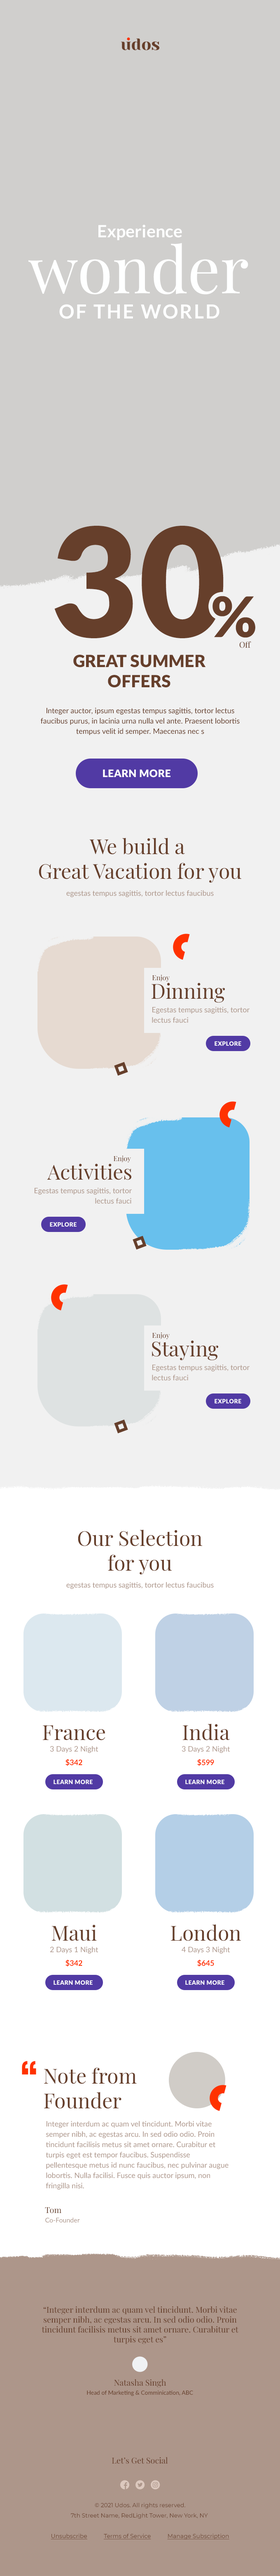
<style>
.page{position:relative;width:280px;height:2576px;background:#f1f1f1}
.page>*{position:absolute;margin:0}
.t1{font:17px "Lato-Bold";color:#feffff}
.t2{font:64.2px "PlayfairDisplay-Regular";color:#feffff}
.t3{font:19.4px "Lato-Bold";letter-spacing:0.08em;color:#feffff;text-transform:uppercase}
.t4{font:151px "Lato-Black";color:#663f2b}
.t5{font:55.6px "Lato-Black";color:#663f2b}
.t6{font:8.2px "PlayfairDisplay-Regular";color:#663f2b}
.t7{font:16.9px "Lato-Black";color:#663f2b;text-transform:uppercase}
.t8{font:7.4px/10.3px "Lato-Regular";color:#663f2b}
.t9{font:10.3px "Lato-Black";letter-spacing:0.02em;color:#ffffff;text-transform:uppercase}
.t10{font:20.6px "PlayfairDisplay-Regular";color:#663f2b}
.t11{font:7.4px "Lato-Regular";color:#ad968a}
.t12{font:7px "PlayfairDisplay-Regular";color:#663f2b}
.t13{font:7.4px/10.3px "Lato-Regular";color:#ad968a}
.t14{font:5.8px "Lato-Black";letter-spacing:0.04em;color:#ffffff;text-transform:uppercase}
.t15{font:7.4px "Lato-Bold";color:#ff3200}
.t16{font:6.6px "Lato-Regular";color:#ad968a}
.t17{font:5.8px "Lato-Regular";color:#663f2b}
.t18{font:5.8px/10.3px "Montserrat-Regular";color:#663f2b}
.t19{font:5.8px/10.3px "Montserrat-Regular";color:#663f2b;text-decoration:underline}
</style>
<div class="page">
<p class="t1" style="left:98px;top:225px;width:84px;height:15px">Experience</p>
<p class="t2" style="left:28px;top:243px;width:220px;height:52px">wonder</p>
<p class="t3" style="left:59px;top:304px;width:161px;height:15px">of the world</p>
<p class="t4" style="left:54px;top:526px;width:170px;height:112px">30</p>
<p class="t5" style="left:213px;top:596px;width:42px;height:42px">%</p>
<p class="t6" style="left:239px;top:641px;width:12px;height:7px">Off</p>
<p class="t7" style="left:73px;top:655px;width:133px;height:33px;text-align:center">Great Summer<br>Offers</p>
<p class="t8" style="left:41px;top:707px;width:199px;height:28px;text-align:center">Integer auctor, ipsum egestas tempus sagittis, tortor lectus faucibus purus, in lacinia urna nulla vel ante. Praesent lobortis tempus velit id semper. Maecenas nec s</p>
<p class="t9" style="left:103px;top:769px;width:68px;height:8px">LEARN MORE</p>
<p class="t10" style="left:39px;top:838px;width:202px;height:45px;text-align:center">We build a <br>Great Vacation for you</p>
<p class="t11" style="left:66px;top:890px;width:148px;height:7px">egestas tempus sagittis, tortor lectus faucibus</p>
<p class="t12" style="left:152px;top:975px;width:18px;height:6px">Enjoy</p>
<p class="t10" style="left:152px;top:983px;width:73px;height:20px">Dinning</p>
<p class="t13" style="left:152px;top:1007px;width:98px;height:16px">Egestas tempus sagittis, tortor lectus fauci</p>
<p class="t14" style="left:215px;top:1041px;width:26px;height:5px">EXPLORE</p>
<p class="t12" style="left:114px;top:1156px;width:17px;height:6px">Enjoy</p>
<p class="t10" style="left:47px;top:1164px;width:84px;height:16px">Activities</p>
<p class="t13" style="left:35px;top:1187px;width:97px;height:17px;text-align:right">Egestas tempus sagittis, tortor lectus fauci</p>
<p class="t14" style="left:50px;top:1222px;width:27px;height:5px">EXPLORE</p>
<p class="t12" style="left:152px;top:1332px;width:18px;height:7px">Enjoy</p>
<p class="t10" style="left:152px;top:1340px;width:66px;height:21px">Staying</p>
<p class="t13" style="left:152px;top:1364px;width:98px;height:17px">Egestas tempus sagittis, tortor lectus fauci</p>
<p class="t14" style="left:215px;top:1399px;width:26px;height:4px">EXPLORE</p>
<p class="t10" style="left:78px;top:1529px;width:124px;height:46px;text-align:center">Our Selection<br>for you</p>
<p class="t11" style="left:66px;top:1582px;width:148px;height:7px">egestas tempus sagittis, tortor lectus faucibus</p>
<p class="t10" style="left:43px;top:1725px;width:62px;height:15px">France</p>
<p class="t10" style="left:183px;top:1724px;width:47px;height:16px">India</p>
<p class="t11" style="left:50px;top:1746px;width:48px;height:7px">3 Days 2 Night</p>
<p class="t11" style="left:182px;top:1746px;width:48px;height:7px">3 Days 2 Night</p>
<p class="t15" style="left:66px;top:1759px;width:16px;height:7px">$342</p>
<p class="t15" style="left:197px;top:1759px;width:17px;height:7px">$599</p>
<p class="t14" style="left:54px;top:1780px;width:39px;height:4px">learn more</p>
<p class="t14" style="left:185px;top:1780px;width:40px;height:4px">learn more</p>
<p class="t10" style="left:52px;top:1925px;width:45px;height:16px">Maui</p>
<p class="t10" style="left:171px;top:1924px;width:70px;height:17px">London</p>
<p class="t11" style="left:50px;top:1946px;width:48px;height:8px">2 Days 1 Night</p>
<p class="t11" style="left:182px;top:1946px;width:48px;height:8px">4 Days 3 Night</p>
<p class="t15" style="left:66px;top:1960px;width:16px;height:7px">$342</p>
<p class="t15" style="left:197px;top:1960px;width:17px;height:7px">$645</p>
<p class="t14" style="left:54px;top:1980px;width:39px;height:5px">learn more</p>
<p class="t14" style="left:185px;top:1980px;width:40px;height:5px">learn more</p>
<p class="t10" style="left:44px;top:2068px;width:93px;height:41px">Note from<br>Founder</p>
<p class="t13" style="left:46px;top:2121px;width:183px;height:69px">Integer interdum ac quam vel tincidunt. Morbi vitae semper nibh, ac egestas arcu. In sed odio odio. Proin tincidunt facilisis metus sit amet ornare. Curabitur et turpis eget est tempor faucibus. Suspendisse pellentesque metus id nunc faucibus, nec pulvinar augue lobortis. Nulla facilisi. Fusce quis auctor ipsum, non fringilla nisi.</p>
<p class="t6" style="left:45px;top:2207px;width:16px;height:6px">Tom</p>
<p class="t16" style="left:45px;top:2218px;width:35px;height:4px">Co-Founder</p>
<p class="t6" style="left:42px;top:2306px;width:197px;height:38px;text-align:center">“Integer interdum ac quam vel tincidunt. Morbi vitae semper nibh, ac egestas arcu. In sed odio odio. Proin tincidunt facilisis metus sit amet ornare. Curabitur et turpis eget es”</p>
<p class="t6" style="left:114px;top:2379px;width:52px;height:8px">Natasha Singh</p>
<p class="t17" style="left:87px;top:2390px;width:106px;height:6px">Head of Marketing &amp; Comminication, ABC</p>
<p class="t6" style="left:112px;top:2457px;width:56px;height:7px">Let’s Get Social</p>
<p class="t18" style="left:51px;top:2503px;width:178px;height:36px;text-align:center">© 2021 Udos. All rights reserved.<br>7th Street Name, RedLight Tower, New York, NY <br><br><span class="t19">Unsubscribe           Terms of Service           Manage Subscription</span></p>
</div>
